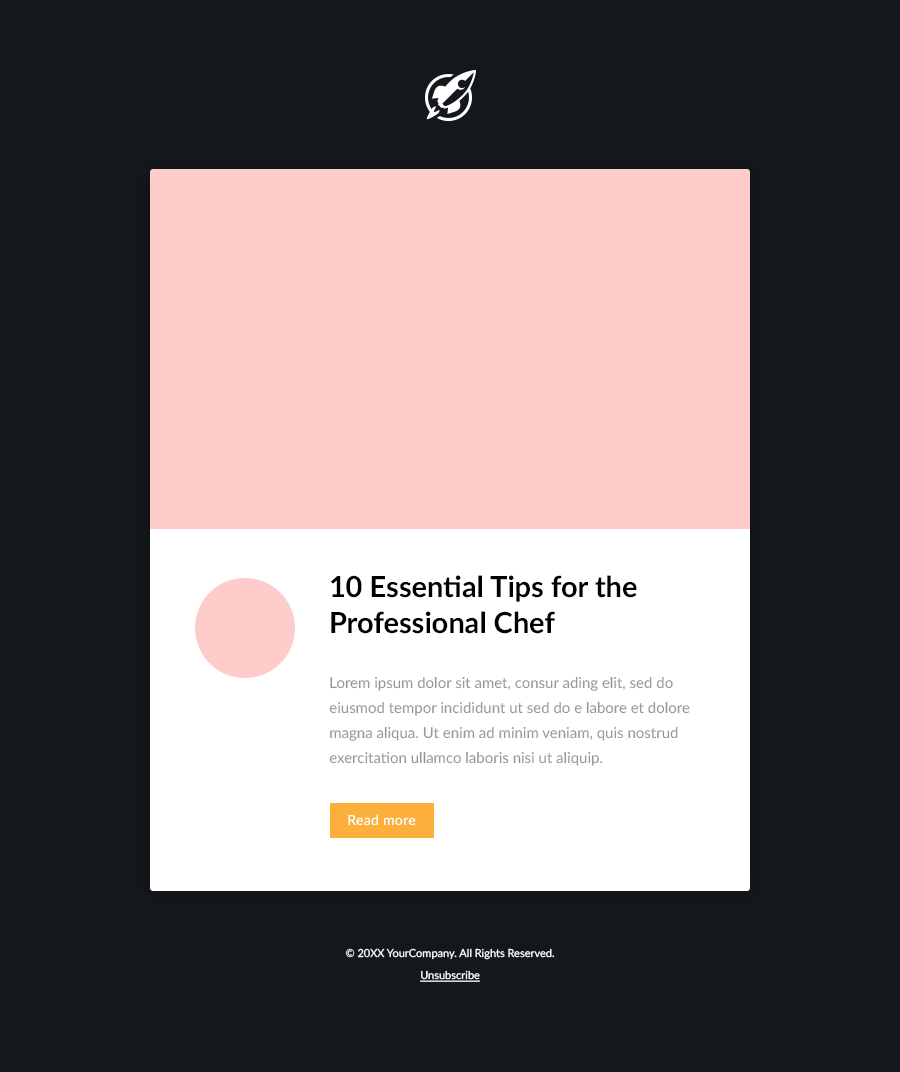
<style>
.page{position:relative;width:900px;height:1072px;background:#14171b}
.page>*{position:absolute;margin:0}
.t1{font:29px/36px "Lato-Bold";color:#000000}
.t2{font:15px/25px "Lato-Regular";color:#989898}
.t3{font:14px "Lato-Semibold";letter-spacing:0.02em;color:#ffffff}
.t4{font:11px/22px "Lato-Regular";color:#ffffff}
.t5{font:11px/22px "Lato-Regular";color:#ffffff;text-decoration:underline}
</style>
<div class="page">
<p class="t1" style="left:331px;top:575px;width:306px;height:59px">10 Essential Tips for the Professional Chef</p>
<p class="t2" style="left:329px;top:676px;width:361px;height:90px">Lorem ipsum dolor sit amet, consur ading elit, sed do eiusmod tempor incididunt ut sed do e labore et dolore magna aliqua. Ut enim ad minim veniam, quis nostrud exercitation ullamco laboris nisi ut aliquip.</p>
<p class="t3" style="left:348px;top:814px;width:68px;height:11px">Read more</p>
<p class="t4" style="left:345px;top:948px;width:210px;height:34px;text-align:center">© 20XX YourCompany. All Rights Reserved.<br><span class="t5">Unsubscribe</span></p>
</div>
